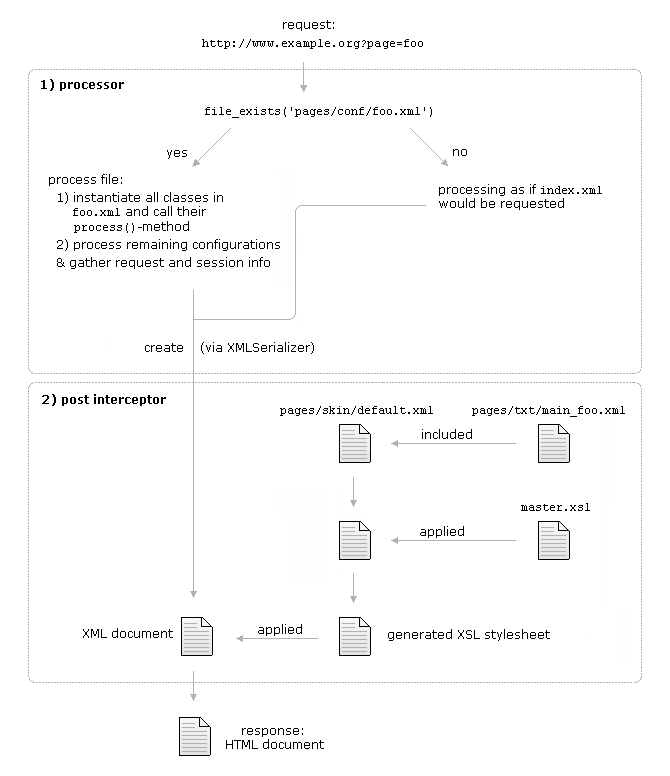
<style>
.page{position:relative;width:670px;height:776px;background:#ffffff}
.page>*{position:absolute;margin:0}
.t1{font:12px/18px "CourierNewPSMT";letter-spacing:0.015em;color:#000000}
.t2{font:12px/18px "Verdana";color:#000000}
.t3{font:12px "Verdana-Bold";color:#000000}
.t4{font:12px "CourierNewPSMT";letter-spacing:0.001em;color:#000000}
.t5{font:12px "Verdana";color:#000000}
.t6{font:12px "CourierNewPSMT";color:#000000}
</style>
<div class="page">
<p class="t1" style="left:202px;top:20px;width:221px;height:29px"><span class="t2">                    request:<br></span>http://www.example.org?page=foo</p>
<p class="t3" style="left:41px;top:79px;width:83px;height:12px">1) processor</p>
<p class="t4" style="left:205px;top:107px;width:227px;height:11px">file_exists('pages/conf/foo.xml')</p>
<p class="t5" style="left:167px;top:150px;width:20px;height:9px">yes</p>
<p class="t5" style="left:453px;top:149px;width:14px;height:7px">no</p>
<p class="t2" style="left:49px;top:174px;width:231px;height:95px"><span class="t5">process file:<br> </span> 1) instantiate all classes in<br>      <span class="t6">foo.xml</span><span class="t5"> and call their<br>     </span><span class="t6">process()</span><span class="t5">-method<br></span>  2) process remaining configurations<br>  &amp; gather request and session info</p>
<p class="t5" style="left:439px;top:184px;width:163px;height:26px">processing as if <span class="t6">index.xml<br></span>would be requested</p>
<p class="t5" style="left:145px;top:342px;width:169px;height:12px">create    (via XMLSerializer)</p>
<p class="t3" style="left:42px;top:394px;width:124px;height:12px">2) post interceptor</p>
<p class="t6" style="left:280px;top:406px;width:153px;height:10px">pages/skin/default.xml</p>
<p class="t6" style="left:472px;top:406px;width:153px;height:11px">pages/txt/main_foo.xml</p>
<p class="t5" style="left:422px;top:429px;width:50px;height:10px">included</p>
<p class="t6" style="left:521px;top:503px;width:69px;height:8px">master.xsl</p>
<p class="t5" style="left:420px;top:526px;width:44px;height:12px">applied</p>
<p class="t5" style="left:83px;top:628px;width:90px;height:10px">XML document</p>
<p class="t5" style="left:258px;top:624px;width:44px;height:12px">applied</p>
<p class="t5" style="left:388px;top:629px;width:162px;height:12px">generated XSL stylesheet</p>
<p class="t5" style="left:226px;top:728px;width:98px;height:21px">response:<br>HTML document</p>
</div>
